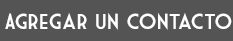
<style>
.page{position:relative;width:233px;height:41px;background:#545455}
.page>*{position:absolute;margin:0}
.t1{font:21.3px "MarketDeco";color:#ffffff}
</style>
<div class="page">
<p class="t1" style="left:5px;top:13px;width:227px;height:17px">Agregar un Contacto</p>
</div>
